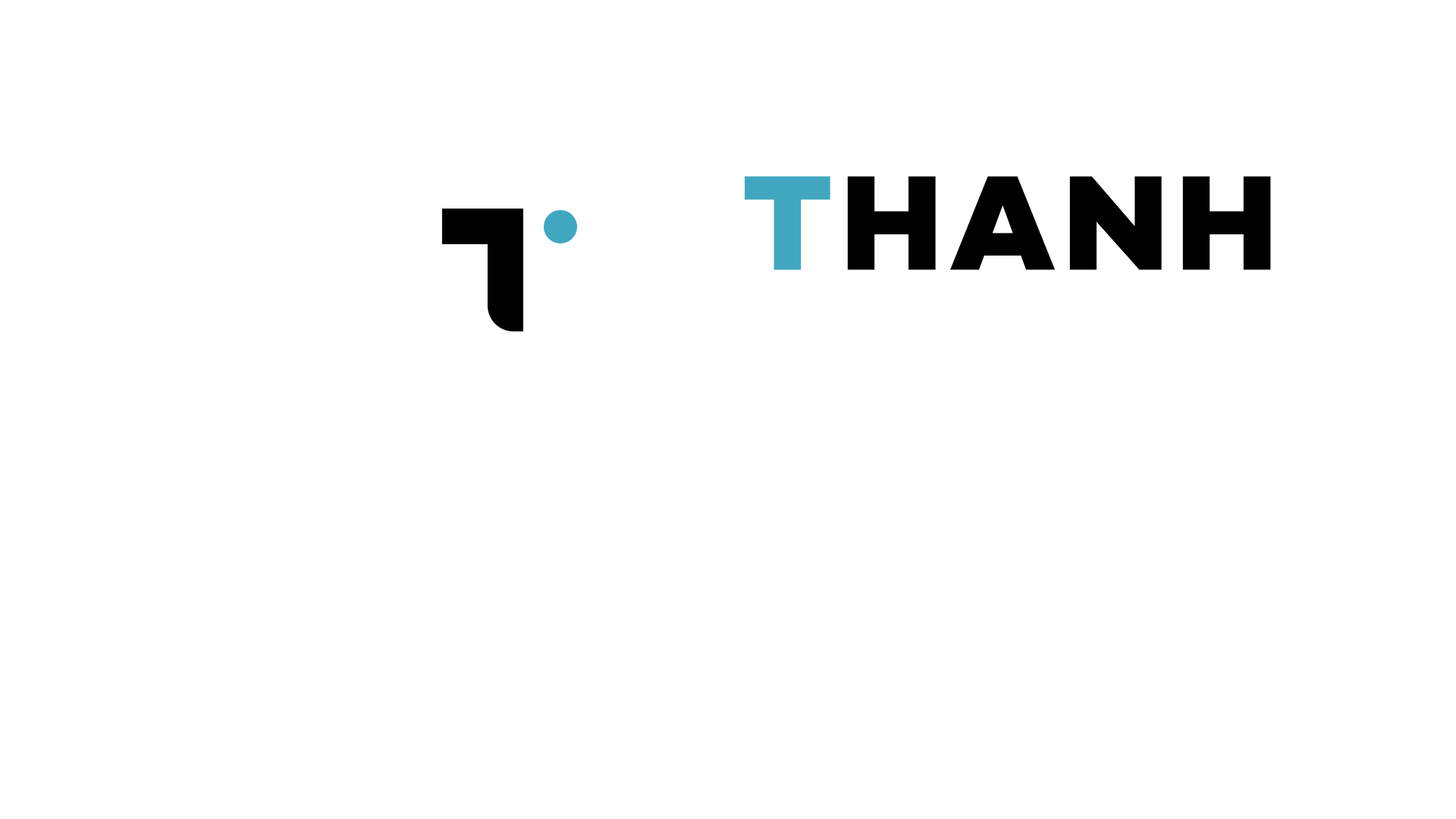
<style>
.page{position:relative;width:1456px;height:819px;background:#ffffff}
.page>*{position:absolute;margin:0}
.t1{font:139.2px "GalanoGrotesque-ExtraBold";letter-spacing:0.05em;color:#000000;text-transform:uppercase}
.t2{font:139.2px "GalanoGrotesque-ExtraBold";letter-spacing:0.05em;color:#41a7c0;text-transform:uppercase}
</style>
<div class="page">
<p class="t1" style="left:745px;top:176px;width:526px;height:94px"><span class="t2">t</span>hanh</p>
</div>
